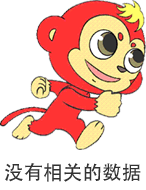
<style>
.page{position:relative;width:146px;height:190px;background:#ffffff}
.page>*{position:absolute;margin:0}
.t1{font:19.6px "AdobeHeitiStd-Regular";color:#333333}
</style>
<div class="page">
<p class="t1" style="left:5px;top:163px;width:136px;height:19px">没有相关的数据</p>
</div>
